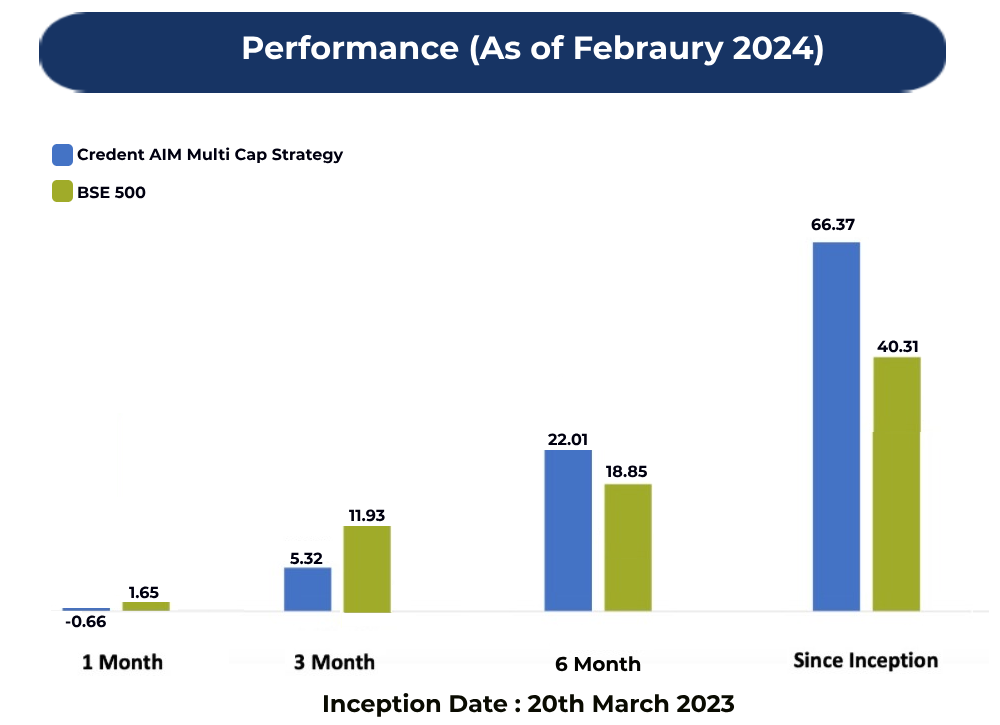
<style>
.page{position:relative;width:1000px;height:725px;background:#ffffff}
.page>*{position:absolute;margin:0}
.t1{font:32px "Montserrat-Bold";color:#ffffff}
.t2{font:16px "Montserrat-Bold";color:#000000}
.t3{font:16px "Montserrat-Bold";color:#000010}
.t4{font:20px "Montserrat-Bold";letter-spacing:-0.003em;color:#030300}
.t5{font:24px "Montserrat-Bold";letter-spacing:-0.003em;color:#0a0b01}
</style>
<div class="page">
<p class="t1" style="left:243px;top:34px;width:580px;height:32px">Performance (As of Febraury 2024)</p>
<p class="t2" style="left:77px;top:147px;width:267px;height:52px">Credent AIM Multi Cap Strategy<br><br>BSE 500</p>
<p class="t3" style="left:811px;top:218px;width:44px;height:13px">66.37</p>
<p class="t3" style="left:877px;top:340px;width:41px;height:13px">40.31</p>
<p class="t3" style="left:548px;top:433px;width:39px;height:13px">22.01</p>
<p class="t3" style="left:606px;top:465px;width:41px;height:13px">18.85</p>
<p class="t3" style="left:349px;top:509px;width:36px;height:13px">11.93</p>
<p class="t3" style="left:290px;top:552px;width:33px;height:13px">5.32</p>
<p class="t3" style="left:129px;top:586px;width:30px;height:13px">1.65</p>
<p class="t3" style="left:65px;top:615px;width:41px;height:13px">-0.66</p>
<p class="t4" style="left:555px;top:656px;width:86px;height:16px">6 Month</p>
<p class="t5" style="left:323px;top:693px;width:412px;height:24px">Inception Date : 20th March 2023</p>
</div>
